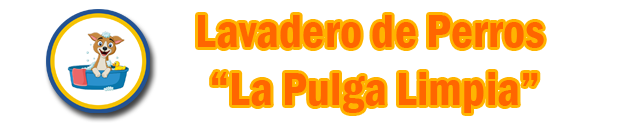
<style>
.page{position:relative;width:627px;height:126px;background:#ffffff}
.page>*{position:absolute;margin:0}
.t1{font:48.5px "FranklinGothic-DemiCond";color:#ff6600}
</style>
<div class="page">
<p class="t1" style="left:198px;top:15px;width:346px;height:98px;text-align:center">Lavadero de Perros <br>“La Pulga Limpia”</p>
</div>
